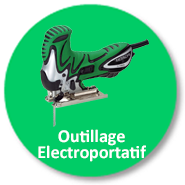
<style>
.page{position:relative;width:185px;height:185px;background:#00cc66}
.page>*{position:absolute;margin:0}
.t1{font:18px/16px "Calibri-Bold";color:#ffffff}
</style>
<div class="page">
<p class="t1" style="left:38px;top:129px;width:108px;height:33px;text-align:center">Outillage   <br>Electroportatif</p>
</div>
